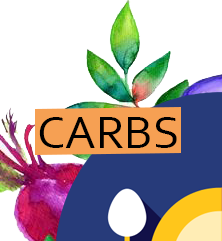
<style>
.page{position:relative;width:222px;height:241px;background:#ffffff}
.page>*{position:absolute;margin:0}
.t1{font:48px "Corbel";color:#000000}
</style>
<div class="page">
<p class="t1" style="left:39px;top:117px;width:138px;height:31px">CARBS</p>
</div>
